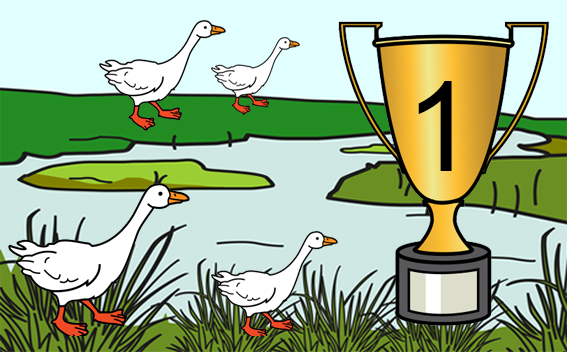
<style>
.page{position:relative;width:567px;height:352px}
.page>*{position:absolute;margin:0}
.t1{font:125px "ArialMT";color:#000000}
</style>
<div class="page">
<p class="t1" style="left:418px;top:81px;width:34px;height:90px">1</p>
</div>
